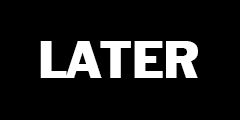
<style>
.page{position:relative;width:240px;height:120px;background:#000000}
.page>*{position:absolute;margin:0}
.t1{font:48px "FranklinGothic-Regular";color:#ffffff}
</style>
<div class="page">
<p class="t1" style="left:40px;top:41px;width:158px;height:37px">LATER</p>
</div>
